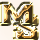
<style>
.page{position:relative;width:40px;height:40px}
.page>*{position:absolute;margin:0}
.t1{font:23.7px "AgencyFB-Bold";scale:2.59 1}
.t2{font:28.9px "AgencyFB-Bold";scale:1.85 1}
</style>
<div class="page">
<p class="t1" style="left:3px;top:4px;width:30px;height:19px">M</p>
<p class="t2" style="left:17px;top:16px;width:21px;height:23px">S</p>
</div>
